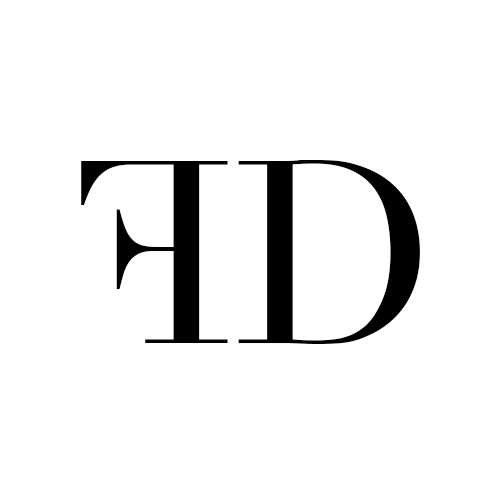
<style>
.page{position:relative;width:500px;height:500px;background:#ffffff}
.page>*{position:absolute;margin:0}
.t1{font:255.9px "Didot";color:#000000}
</style>
<div class="page">
<p class="t1" style="left:81px;top:161px;width:147px;height:182px;rotate:180deg">F</p>
<p class="t1" style="left:238px;top:160px;width:182px;height:184px">D</p>
</div>
